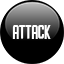
<style>
.page{position:relative;width:64px;height:64px;background:#000000}
.page>*{position:absolute;margin:0}
.t1{font:16.3px "PonterRounded";color:#ffffff;scale:0.8 1}
</style>
<div class="page">
<p class="t1" style="left:12px;top:25px;width:39px;height:14px">attack</p>
</div>
